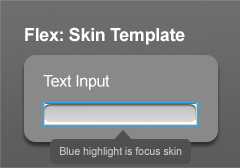
<style>
.page{position:relative;width:240px;height:168px;background:#898989}
.page>*{position:absolute;margin:0}
.t1{font:18px "Arial-BoldMT";letter-spacing:-0.02em;color:#ffffff}
.t2{font:16px "ArialMT";letter-spacing:-0.02em;color:#ffffff}
.t3{font:11px "ArialMT";letter-spacing:-0.02em;color:#cccccc}
</style>
<div class="page">
<p class="t1" style="left:25px;top:27px;width:160px;height:18px">Flex: Skin Template</p>
<p class="t2" style="left:43px;top:75px;width:67px;height:15px">Text Input</p>
<p class="t3" style="left:60px;top:147px;width:122px;height:11px">Blue highlight is focus skin</p>
</div>
